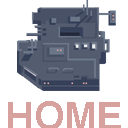
<style>
.page{position:relative;width:128px;height:128px;background:#ffffff}
.page>*{position:absolute;margin:0}
.t1{font:38.9px "Helvetica-Bold";color:#d7a29d}
</style>
<div class="page">
<p class="t1" style="left:8px;top:101px;width:113px;height:29px">HOME</p>
</div>
